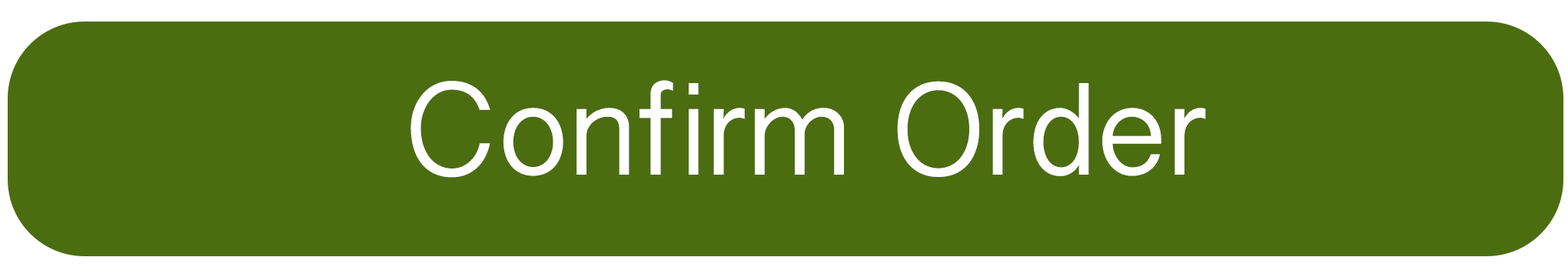
<style>
.page{position:relative;width:1568px;height:277px;background:#4b6d10}
.page>*{position:absolute;margin:0}
.t1{font:115.3px "BanglaSangamMN";color:#ffffff}
</style>
<div class="page">
<p class="t1" style="left:410px;top:80px;width:796px;height:98px">Confirm Order</p>
</div>
